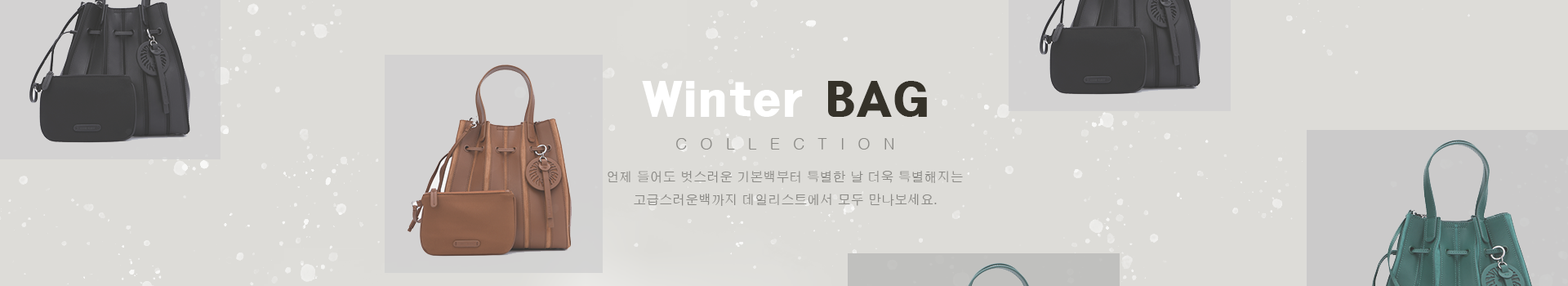
<style>
.page{position:relative;width:1568px;height:286px;background:#dddcd8}
.page>*{position:absolute;margin:0}
.t1{font:16.3px "Gulim";letter-spacing:0.8em;color:#8a8985}
.t2{font:13.1px "H2gprM";color:#8a8985}
</style>
<div class="page">
<p class="t1" style="left:676px;top:138px;width:217px;height:11px">COLLECTION</p>
<p class="t2" style="left:608px;top:171px;width:355px;height:35px;text-align:center">언제 들어도 벗스러운 기본백부터 특별한 날 더욱 특별해지는<br>고급스러운백까지 데일리스트에서 모두 만나보세요.</p>
</div>
